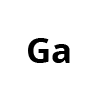
<style>
.page{position:relative;width:100px;height:100px;background:#ffffff}
.page>*{position:absolute;margin:0}
.t1{font:35px "OpenSans-Bold";color:#000000}
</style>
<div class="page">
<p class="t1" style="left:28px;top:38px;width:42px;height:25px">Ga</p>
</div>
